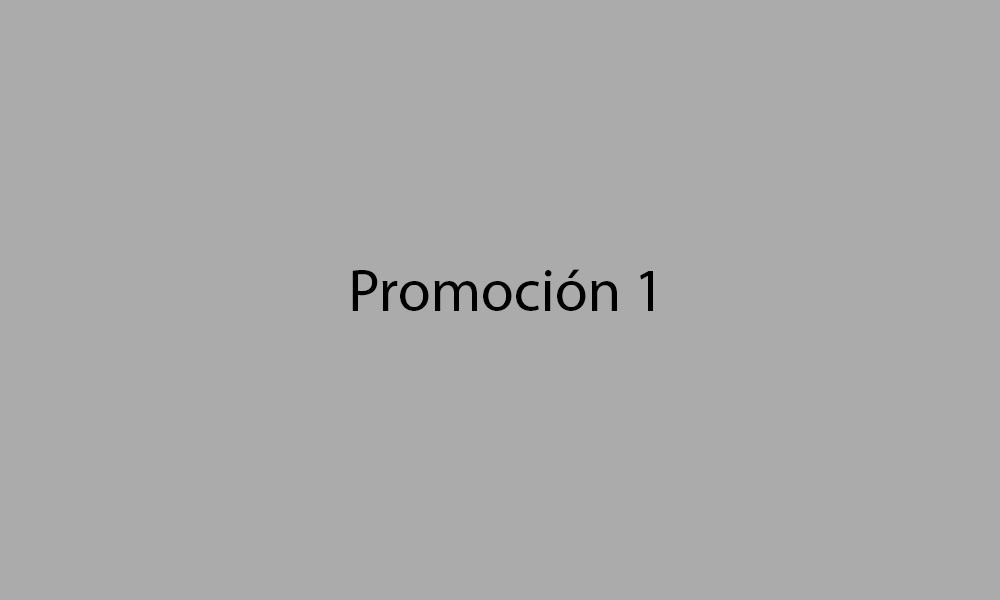
<style>
.page{position:relative;width:1000px;height:600px;background:#ababab}
.page>*{position:absolute;margin:0}
.t1{font:60px "MyriadHebrew-Regular";color:#000000}
</style>
<div class="page">
<p class="t1" style="left:352px;top:269px;width:301px;height:42px">Promoción 1</p>
</div>
